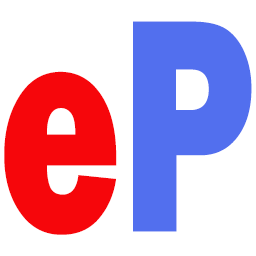
<style>
.page{position:relative;width:256px;height:256px;background:#ffffff}
.page>*{position:absolute;margin:0}
.t1{font:314.9px "FranklinGothic-Heavy";color:#f6060b;scale:0.66 1}
.t2{font:314.9px "FranklinGothic-Heavy";color:#526fee;scale:0.66 1}
</style>
<div class="page">
<p class="t1" style="left:4px;top:21px;width:248px;height:214px">e<span class="t2">P</span></p>
</div>
